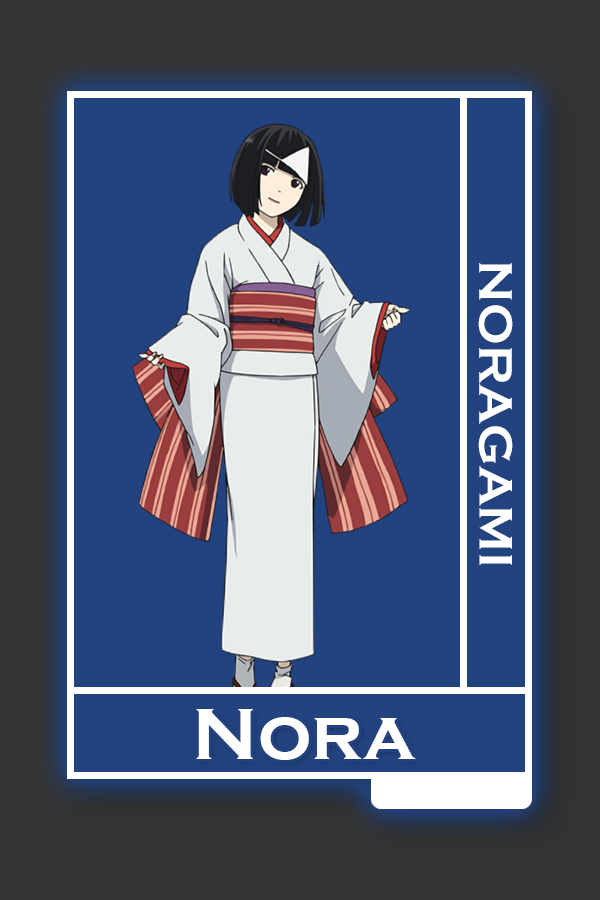
<style>
.page{position:relative;width:600px;height:900px;background:#22437f}
.page>*{position:absolute;margin:0}
.t1{font:48.8px "CopperplateGothic-Bold";color:#ffffff}
.t2{font:75px "CopperplateGothic-Bold";color:#ffffff}
</style>
<div class="page">
<p class="t1" style="left:478px;top:263px;width:35px;height:302px;rotate:90deg">NORAGAMI</p>
<p class="t2" style="left:196px;top:709px;width:220px;height:51px">Nora</p>
</div>
